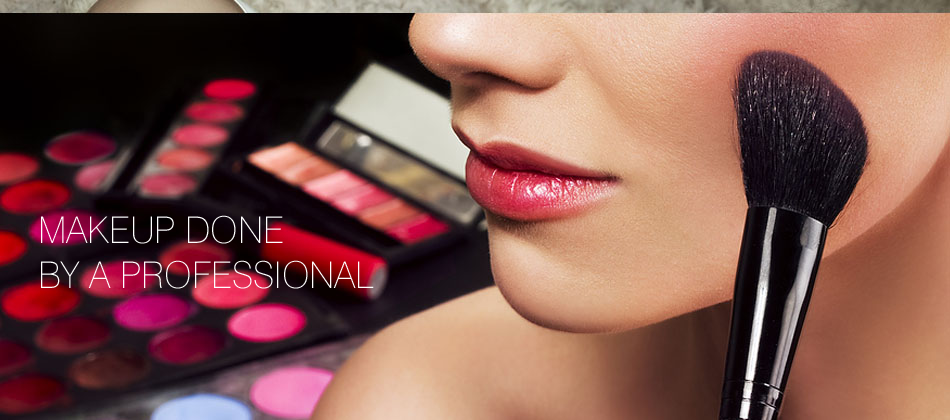
<style>
.page{position:relative;width:950px;height:420px}
.page>*{position:absolute;margin:0}
.t1{font:36.8px "Swiss721BT-Thin";color:#ffffff}
</style>
<div class="page">
<p class="t1" style="left:41px;top:215px;width:333px;height:74px">MAKEUP DONE<br>BY A PROFESSIONAL</p>
</div>
